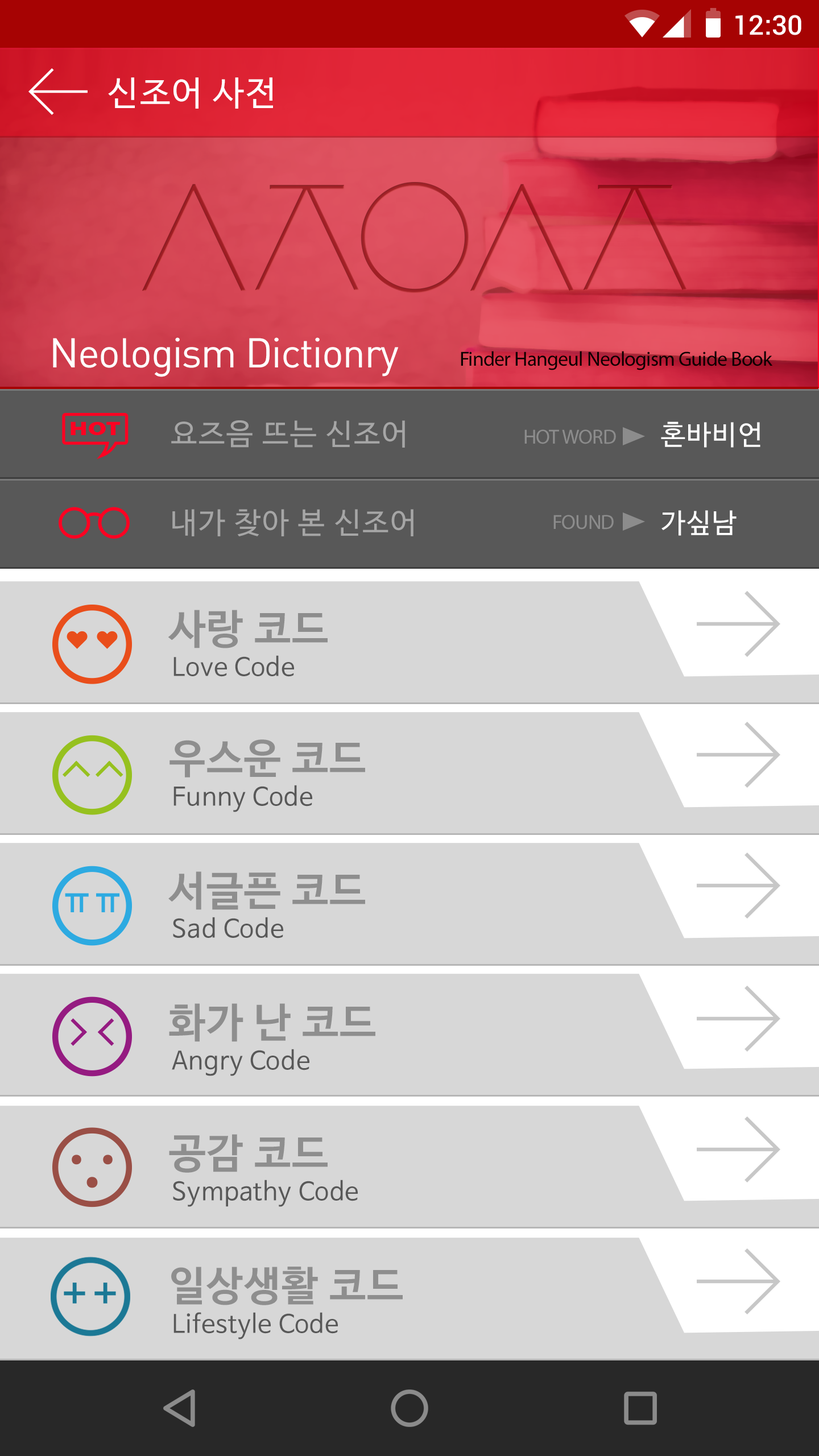
<style>
.page{position:relative;width:819px;height:1456px;background:#d7d7d7}
.page>*{position:absolute;margin:0}
.t1{font:27.3px "Roboto-Medium";color:#ffffff}
.t2{font:34.1px "NanumBarunGothic";letter-spacing:0.05em;color:#ffffff}
.t3{font:40.9px "DINAlternate-Regular";letter-spacing:-0.025em;color:#ffffff}
.t4{font:20.5px "MyriadPro-Regular";letter-spacing:-0.025em;color:#0a0000}
.t5{font:29.6px "NanumBarunGothic";letter-spacing:0.05em;color:#a6a6a6}
.t6{font:27.3px "NanumBarunGothic";letter-spacing:0.05em;color:#ffffff}
.t7{font:20.5px "MyriadPro-Regular";letter-spacing:-0.025em;color:#8c8c8c}
.t8{font:40.9px "NanumBarunGothicBold";letter-spacing:0.025em;color:#8d8d8d}
.t9{font:25px "NanumBarunGothic";letter-spacing:0.025em;color:#595959}
.t10{font:40.9px "NanumBarunGothicBold";letter-spacing:0.025em;color:#8e8e8e}
.t11{font:25px "NanumBarunGothic";letter-spacing:0.025em;color:#585858}
</style>
<div class="page">
<p class="t1" style="left:735px;top:15px;width:66px;height:20px">12:30</p>
<p class="t2" style="left:108px;top:77px;width:165px;height:32px">신조어 사전</p>
<p class="t3" style="left:53px;top:337px;width:346px;height:40px">Neologism Dictionry</p>
<p class="t4" style="left:461px;top:351px;width:312px;height:19px">Finder Hangeul Neologism Guide Book</p>
<p class="t5" style="left:171px;top:420px;width:234px;height:28px">요즈음 뜨는 신조어</p>
<p class="t6" style="left:661px;top:421px;width:99px;height:27px">혼바비언</p>
<p class="t7" style="left:524px;top:429px;width:92px;height:15px">HOT WORD</p>
<p class="t5" style="left:172px;top:509px;width:241px;height:27px">내가 찾아 본 신조어</p>
<p class="t7" style="left:553px;top:515px;width:61px;height:14px">FOUND</p>
<p class="t6" style="left:661px;top:510px;width:76px;height:26px">가싶남</p>
<p class="t8" style="left:168px;top:610px;width:160px;height:38px">사랑 코드</p>
<p class="t9" style="left:173px;top:655px;width:121px;height:22px">Love Code</p>
<p class="t10" style="left:169px;top:739px;width:196px;height:38px">우스운 코드</p>
<p class="t11" style="left:173px;top:785px;width:139px;height:27px">Funny Code</p>
<p class="t10" style="left:168px;top:871px;width:197px;height:39px">서글픈 코드</p>
<p class="t11" style="left:173px;top:917px;width:110px;height:21px">Sad Code</p>
<p class="t10" style="left:169px;top:1003px;width:206px;height:39px">화가 난 코드</p>
<p class="t11" style="left:172px;top:1049px;width:137px;height:27px">Angry Code</p>
<p class="t10" style="left:169px;top:1134px;width:159px;height:39px">공감 코드</p>
<p class="t11" style="left:173px;top:1180px;width:185px;height:27px">Sympathy Code</p>
<p class="t10" style="left:171px;top:1267px;width:232px;height:38px">일상생활 코드</p>
<p class="t11" style="left:173px;top:1312px;width:165px;height:27px">Lifestyle Code</p>
</div>
